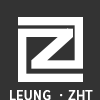
<style>
.page{position:relative;width:100px;height:100px;background:#333333}
.page>*{position:absolute;margin:0}
.t1{font:12.5px "SourceHanSansCN-Regular";color:#ffffff;font-weight:bold}
</style>
<div class="page">
<p class="t1" style="left:10px;top:90px;width:83px;height:11px">LEUNG  · ZHT</p>
</div>
